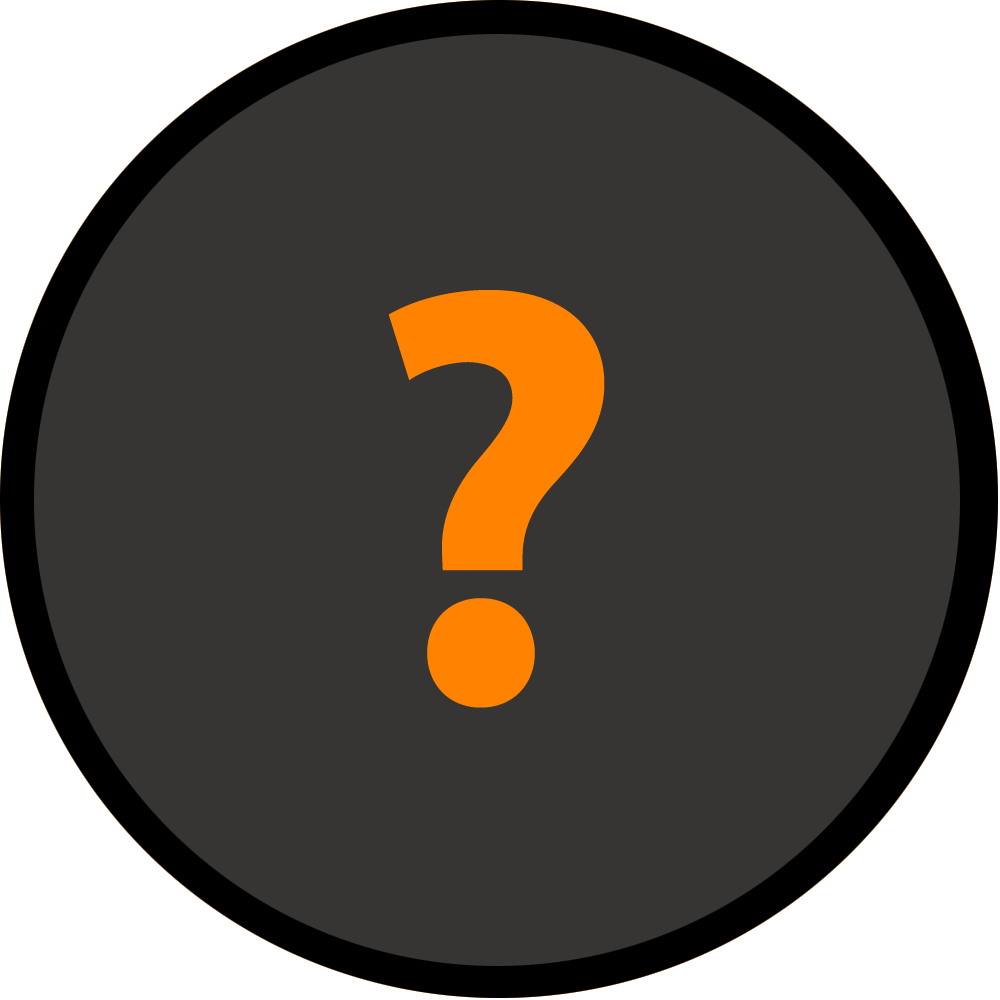
<style>
.page{position:relative;width:1000px;height:1000px;background:#363534}
.page>*{position:absolute;margin:0}
.t1{font:600px "MyriadPro-Bold";color:#ff8300}
</style>
<div class="page">
<p class="t1" style="left:388px;top:290px;width:217px;height:418px">?</p>
</div>
